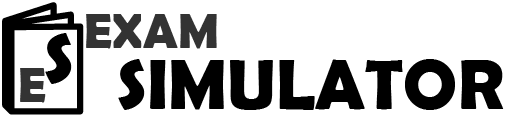
<style>
.page{position:relative;width:513px;height:116px;background:#ffffff}
.page>*{position:absolute;margin:0}
.t1{font:50px "BerlinSansFBDemi-Bold";color:#333333;text-transform:uppercase}
.t2{font:72px "BerlinSansFBDemi-Bold";color:#000000;text-transform:uppercase}
</style>
<div class="page">
<p class="t1" style="left:86px;top:14px;width:131px;height:35px">ExAM</p>
<p class="t2" style="left:118px;top:59px;width:386px;height:51px">Simulator</p>
</div>
